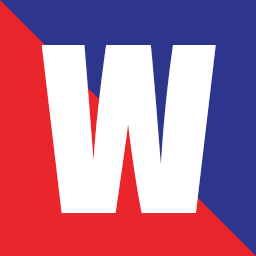
<style>
.page{position:relative;width:256px;height:256px;background:#ffffff}
.page>*{position:absolute;margin:0}
.t1{font:213.3px "Impact";color:#ffffff}
</style>
<div class="page">
<p class="t1" style="left:41px;top:45px;width:175px;height:168px">W</p>
</div>
